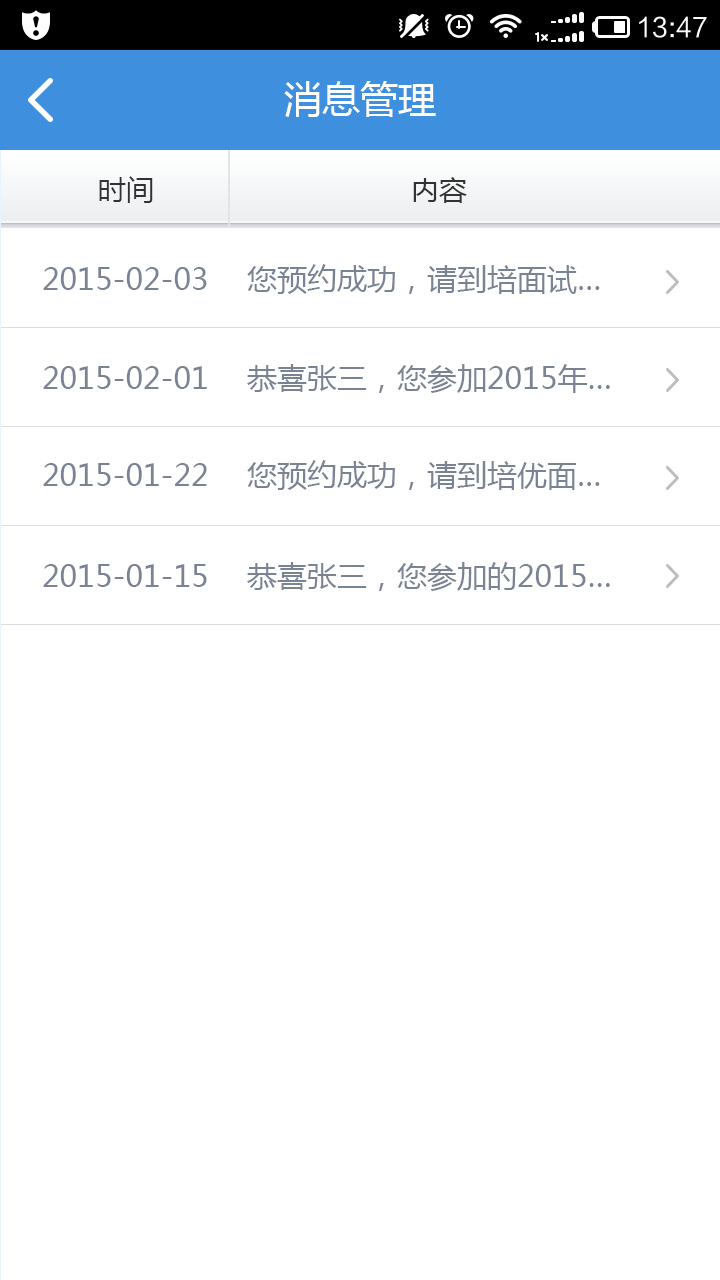
<style>
.page{position:relative;width:720px;height:1280px;background:#ffffff}
.page>*{position:absolute;margin:0}
.t1{font:38px "MicrosoftYaHei";color:#ffffff}
.t2{font:28px "MicrosoftYaHei";color:#333333}
.t3{font:30px "MicrosoftYaHei";color:#7a8394}
</style>
<div class="page">
<p class="t1" style="left:284px;top:81px;width:152px;height:36px">消息管理</p>
<p class="t2" style="left:99px;top:176px;width:368px;height:27px">时间                               内容</p>
<p class="t3" style="left:43px;top:267px;width:164px;height:23px">2015-02-03</p>
<p class="t3" style="left:247px;top:264px;width:353px;height:30px">您预约成功，请到培面试…</p>
<p class="t3" style="left:43px;top:366px;width:164px;height:23px">2015-02-01</p>
<p class="t3" style="left:247px;top:364px;width:363px;height:29px">恭喜张三，您参加2015年…</p>
<p class="t3" style="left:247px;top:460px;width:353px;height:30px">您预约成功，请到培优面…</p>
<p class="t3" style="left:43px;top:463px;width:164px;height:23px">2015-01-22</p>
<p class="t3" style="left:43px;top:564px;width:164px;height:23px">2015-01-15</p>
<p class="t3" style="left:247px;top:562px;width:363px;height:29px">恭喜张三，您参加的2015…</p>
</div>
